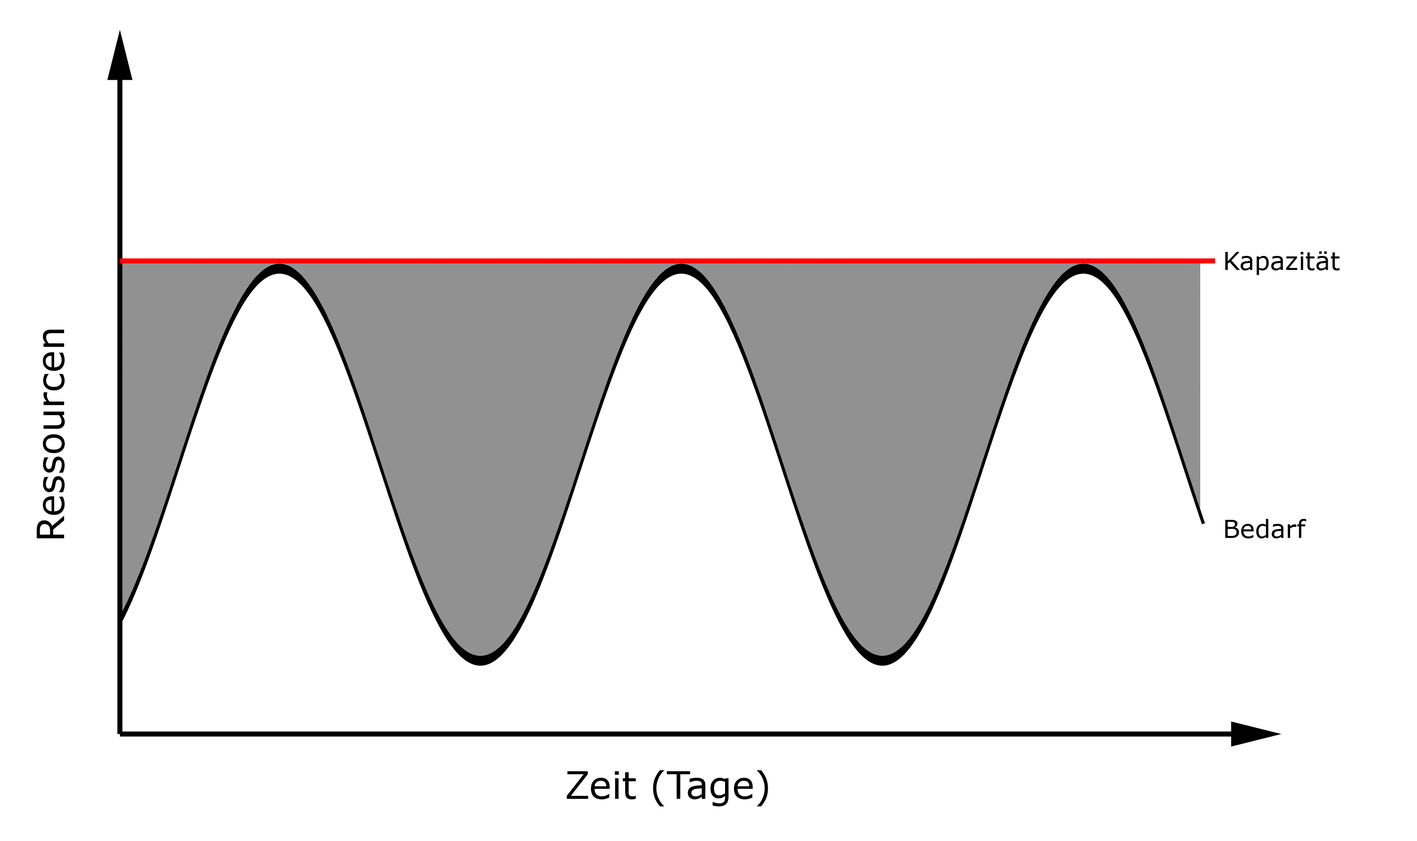
<style>
.page{position:relative;width:1417px;height:841px;background:#ffffff}
.page>*{position:absolute;margin:0}
.t1{font:25.1px "Verdana";color:#000000}
.t2{font:37.6px "Verdana";color:#000000}
</style>
<div class="page">
<p class="t1" style="left:1226px;top:251px;width:114px;height:24px">Kapazität</p>
<p class="t2" style="left:37px;top:330px;width:28px;height:209px;rotate:-90deg">Ressourcen</p>
<p class="t1" style="left:1225px;top:519px;width:82px;height:20px">Bedarf</p>
<p class="t2" style="left:567px;top:770px;width:201px;height:37px">Zeit (Tage)</p>
</div>
